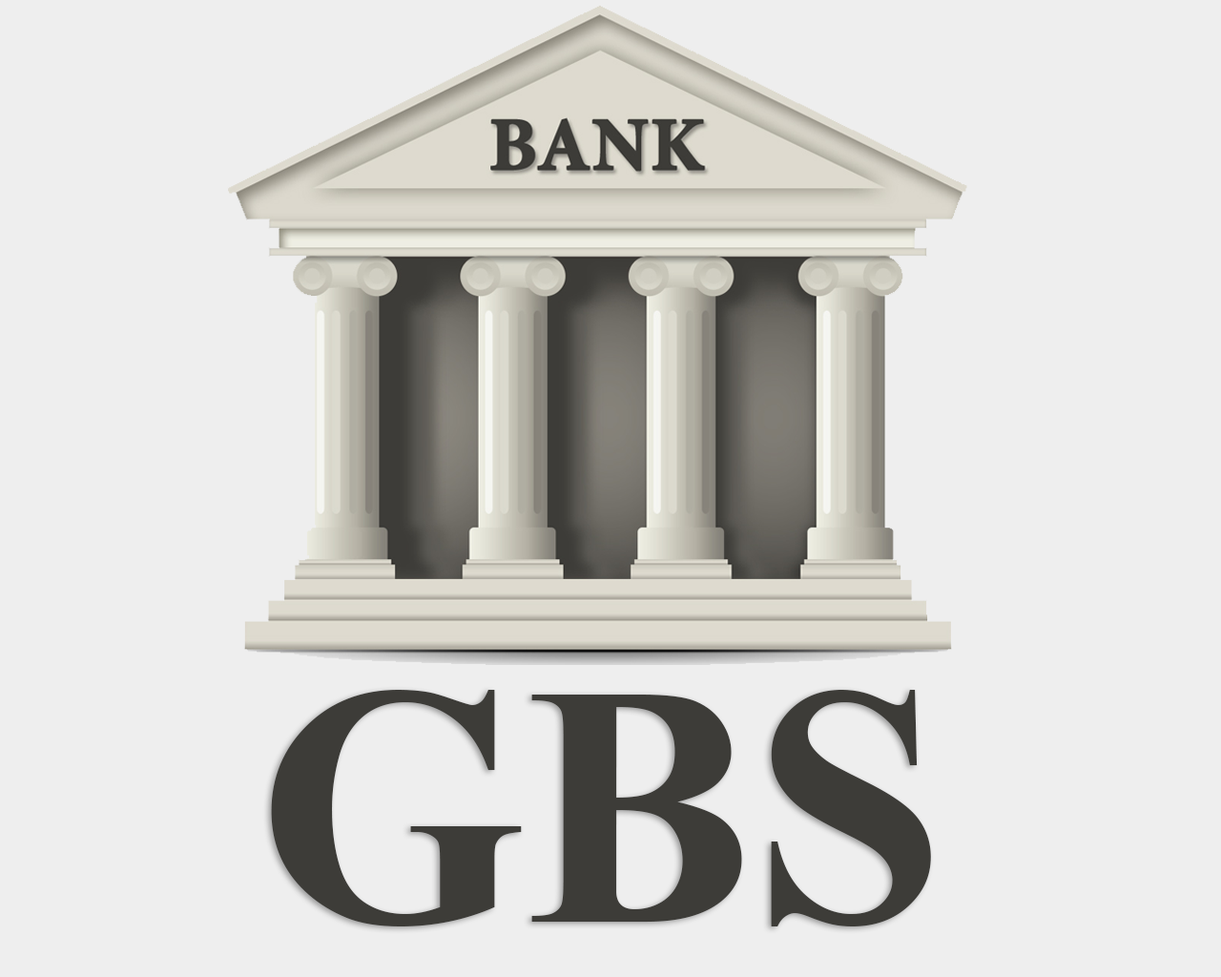
<style>
.page{position:relative;width:1221px;height:977px;background:#eeeeee}
.page>*{position:absolute;margin:0}
.t1{font:343.4px "TimesNewRomanPS-BoldMT";color:#3d3c38}
</style>
<div class="page">
<p class="t1" style="left:271px;top:690px;width:660px;height:236px">GBS</p>
</div>
